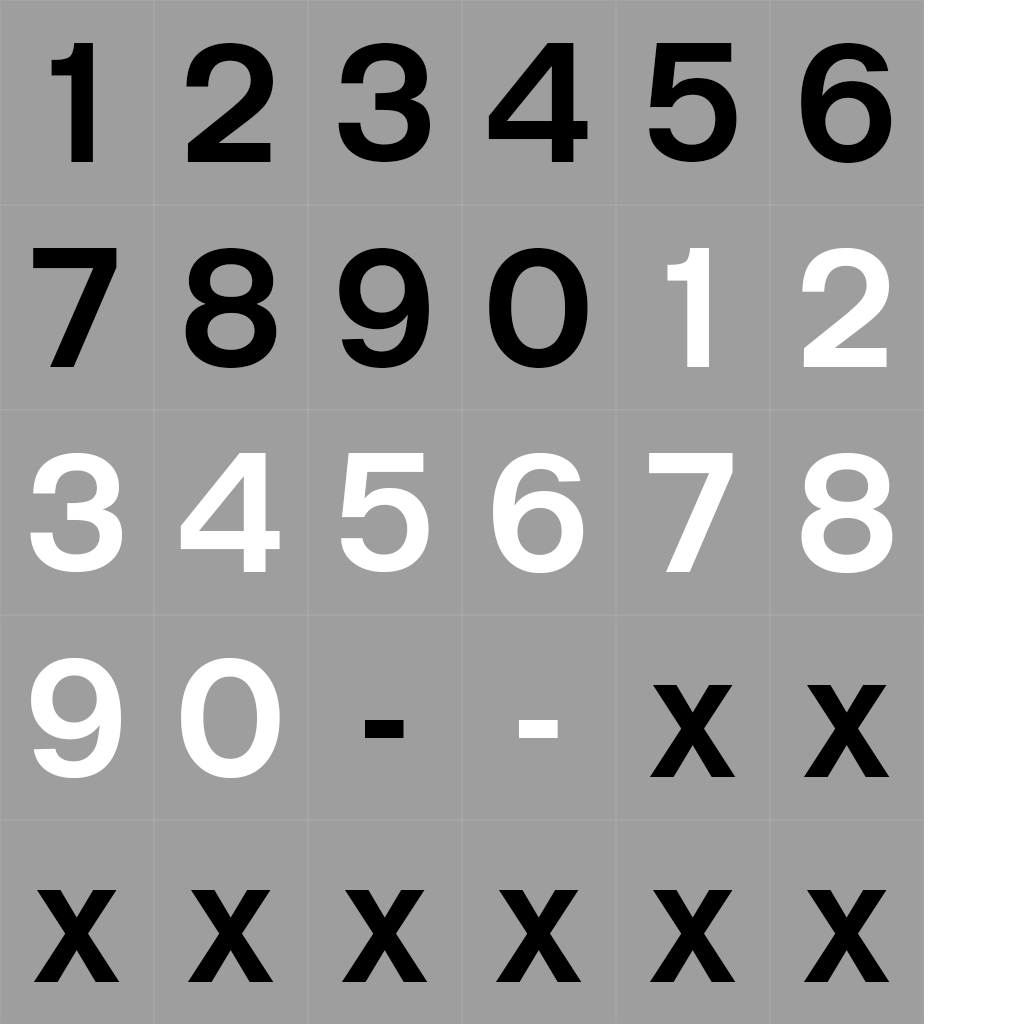
<style>
.page{position:relative;width:1024px;height:1024px;background:#9e9e9e}
.page>*{position:absolute;margin:0}
.t1{font:180px "BritishRailLightNormal";color:#000000}
.t2{font:180px "BritishRailLightNormal";color:#ffffff}
</style>
<div class="page">
<p class="t1" style="left:51px;top:43px;width:42px;height:119px">1</p>
<p class="t1" style="left:186px;top:43px;width:87px;height:119px">2</p>
<p class="t1" style="left:338px;top:43px;width:92px;height:119px">3</p>
<p class="t1" style="left:488px;top:43px;width:100px;height:119px">4</p>
<p class="t1" style="left:649px;top:43px;width:88px;height:119px">5</p>
<p class="t1" style="left:801px;top:43px;width:91px;height:120px">6</p>
<p class="t1" style="left:33px;top:248px;width:84px;height:119px">7</p>
<p class="t1" style="left:185px;top:248px;width:92px;height:120px">8</p>
<p class="t1" style="left:339px;top:248px;width:90px;height:120px">9</p>
<p class="t1" style="left:489px;top:248px;width:99px;height:120px">0</p>
<p class="t2" style="left:667px;top:248px;width:42px;height:119px">1</p>
<p class="t2" style="left:802px;top:248px;width:87px;height:119px">2</p>
<p class="t2" style="left:30px;top:453px;width:92px;height:119px">3</p>
<p class="t2" style="left:180px;top:453px;width:100px;height:119px">4</p>
<p class="t2" style="left:341px;top:453px;width:88px;height:119px">5</p>
<p class="t2" style="left:493px;top:453px;width:91px;height:120px">6</p>
<p class="t2" style="left:649px;top:453px;width:84px;height:119px">7</p>
<p class="t2" style="left:801px;top:453px;width:92px;height:120px">8</p>
<p class="t2" style="left:31px;top:658px;width:90px;height:120px">9</p>
<p class="t2" style="left:181px;top:658px;width:99px;height:120px">0</p>
<p class="t1" style="left:649px;top:685px;width:87px;height:92px">x</p>
<p class="t1" style="left:803px;top:685px;width:87px;height:92px">x</p>
<p class="t1" style="left:365px;top:720px;width:39px;height:18px">-</p>
<p class="t2" style="left:519px;top:720px;width:39px;height:18px">-</p>
<p class="t1" style="left:33px;top:890px;width:87px;height:92px">x</p>
<p class="t1" style="left:187px;top:890px;width:87px;height:92px">x</p>
<p class="t1" style="left:341px;top:890px;width:87px;height:92px">x</p>
<p class="t1" style="left:495px;top:890px;width:87px;height:92px">x</p>
<p class="t1" style="left:649px;top:890px;width:87px;height:92px">x</p>
<p class="t1" style="left:803px;top:890px;width:87px;height:92px">x</p>
</div>
